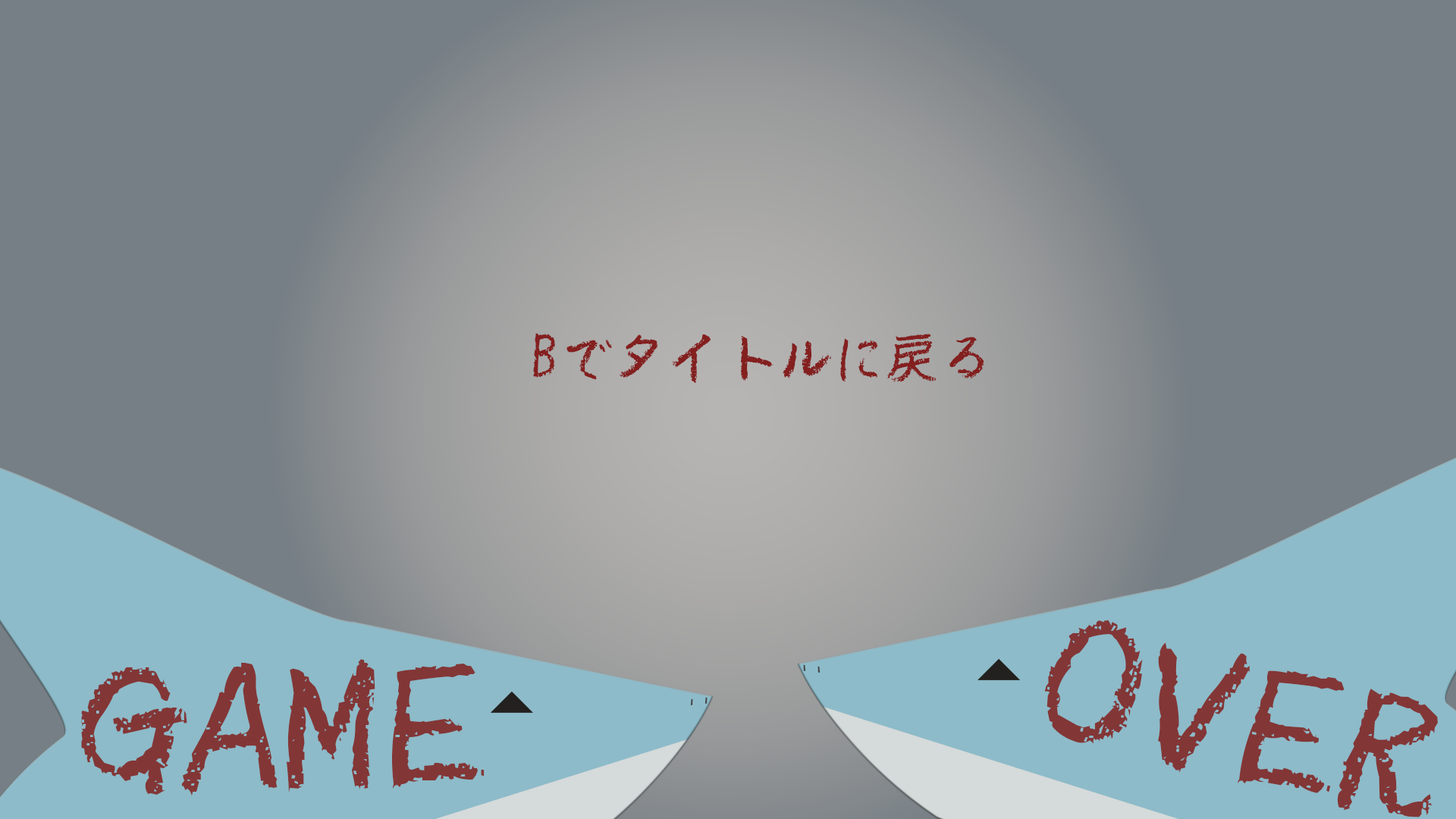
<style>
.page{position:relative;width:1456px;height:819px;background:#767f85}
.page>*{position:absolute;margin:0}
.t1{font:51.6px "AB-chalk";letter-spacing:0.06em;color:#841f1f}
.t2{font:148.3px "AB-chalk";letter-spacing:0.06em;color:#841f1f;scale:1.23 1}
</style>
<div class="page">
<p class="t1" style="left:533px;top:333px;width:451px;height:50px">Bでタイトルに戻る</p>
<p class="t2" style="left:1044px;top:620px;width:394px;height:197px;rotate:13deg">OVER</p>
<p class="t2" style="left:81px;top:659px;width:404px;height:137px">GAME</p>
</div>
